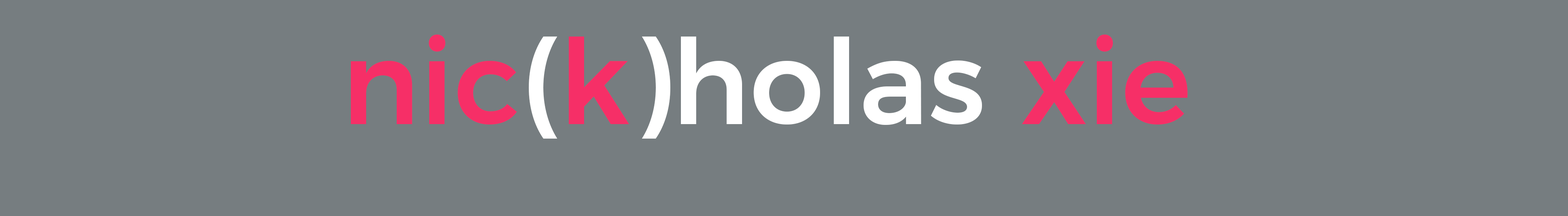
<style>
.page{position:relative;width:1568px;height:216px;background:#767d80}
.page>*{position:absolute;margin:0}
.t1{font:117.6px "Montserrat-Medium";color:#ffffff}
.t2{font:117.6px "Montserrat-Medium";color:#f62f67}
</style>
<div class="page">
<p class="t1" style="left:351px;top:34px;width:837px;height:104px"><span class="t2">nic</span>(<span class="t2">k</span>)holas <span class="t2">xie</span></p>
</div>
